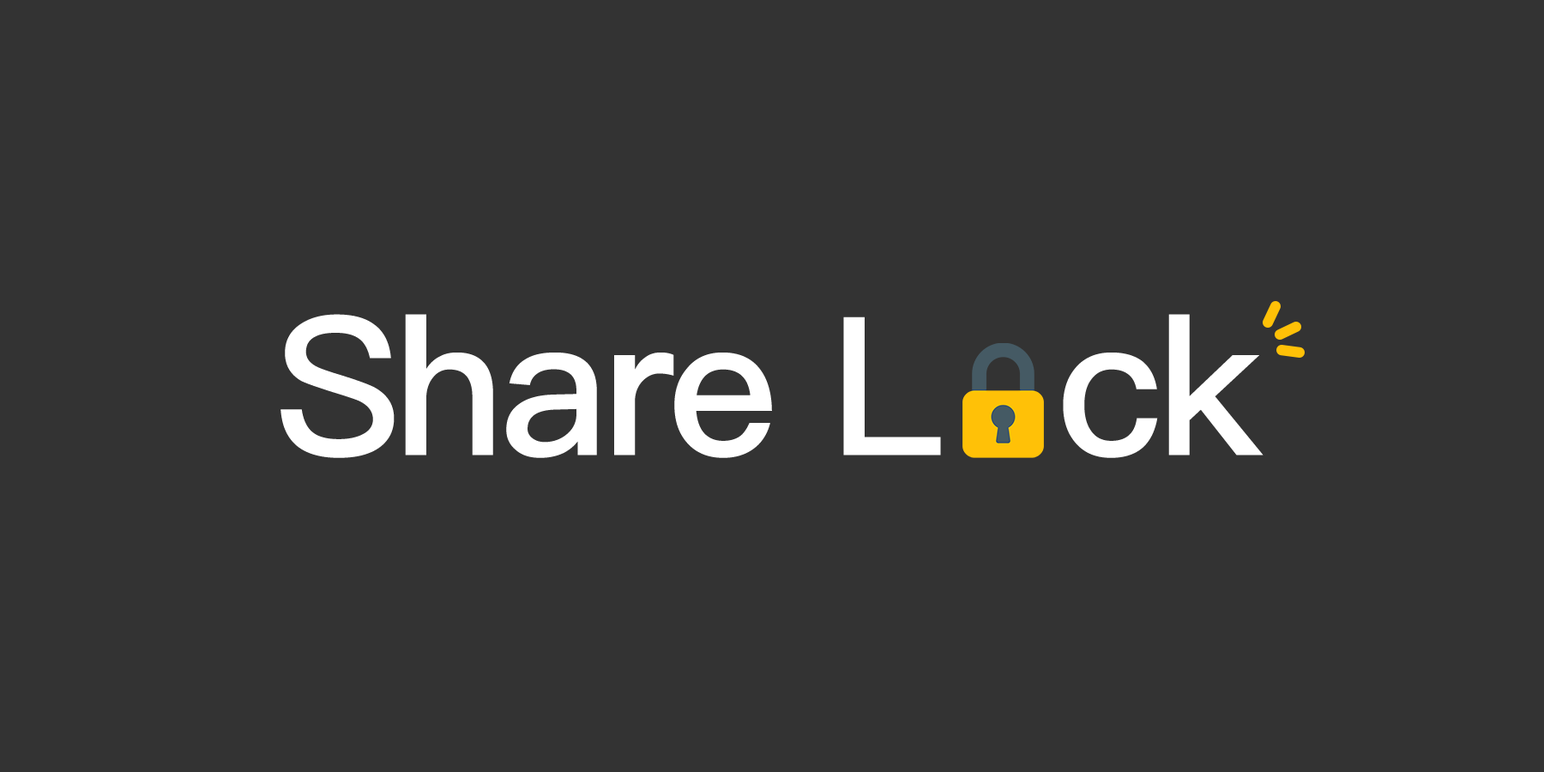
<style>
.page{position:relative;width:1544px;height:772px;background:#333333}
.page>*{position:absolute;margin:0}
.t1{font:193px "PingFangTC-Medium";letter-spacing:-0.03em;color:#ffffff}
</style>
<div class="page">
<p class="t1" style="left:281px;top:314px;width:983px;height:144px">Share L  ck</p>
</div>
